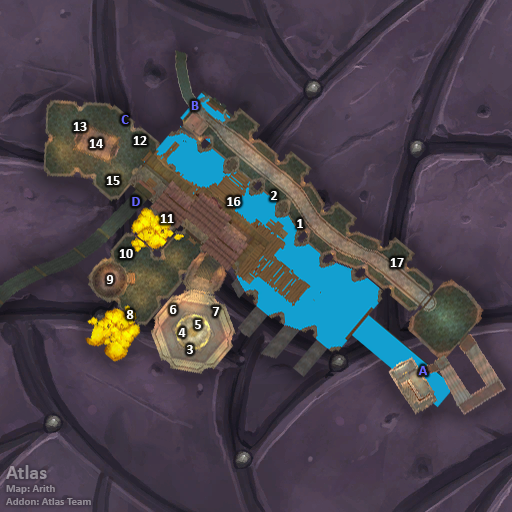
<style>
.page{position:relative;width:512px;height:512px}
.page>*{position:absolute;margin:0}
.t1{font:14px "Calibri-Bold";color:#6666ff}
.t2{font:14px "Calibri-Bold";color:#ffffff}
.t3{font:11px "Calibri-Bold";color:#938c96}
.t4{font:20px "Calibri-Bold";color:#938c96}
</style>
<div class="page">
<p class="t1" style="left:191px;top:101px;width:8px;height:9px">B</p>
<p class="t2" style="left:73px;top:122px;width:14px;height:9px">13</p>
<p class="t1" style="left:121px;top:115px;width:8px;height:9px">C</p>
<p class="t2" style="left:133px;top:136px;width:14px;height:9px">12</p>
<p class="t2" style="left:89px;top:139px;width:14px;height:9px">14</p>
<p class="t2" style="left:106px;top:176px;width:14px;height:9px">15</p>
<p class="t1" style="left:132px;top:197px;width:8px;height:9px">D</p>
<p class="t2" style="left:227px;top:197px;width:14px;height:9px">16</p>
<p class="t2" style="left:271px;top:191px;width:7px;height:9px">2</p>
<p class="t2" style="left:160px;top:214px;width:14px;height:9px">11</p>
<p class="t2" style="left:297px;top:219px;width:6px;height:9px">1</p>
<p class="t2" style="left:119px;top:249px;width:14px;height:9px">10</p>
<p class="t2" style="left:390px;top:258px;width:14px;height:9px">17</p>
<p class="t2" style="left:106px;top:275px;width:8px;height:9px">9</p>
<p class="t2" style="left:170px;top:305px;width:7px;height:9px">6</p>
<p class="t2" style="left:126px;top:310px;width:8px;height:9px">8</p>
<p class="t2" style="left:212px;top:307px;width:8px;height:9px">7</p>
<p class="t2" style="left:178px;top:328px;width:8px;height:9px">4</p>
<p class="t2" style="left:195px;top:320px;width:6px;height:9px">5</p>
<p class="t2" style="left:187px;top:345px;width:6px;height:9px">3</p>
<p class="t1" style="left:418px;top:366px;width:9px;height:9px">A</p>
<p class="t3" style="left:6px;top:465px;width:85px;height:40px"><span class="t4">Atlas<br></span>Map: Arith<br>Addon: Atlas Team</p>
</div>
